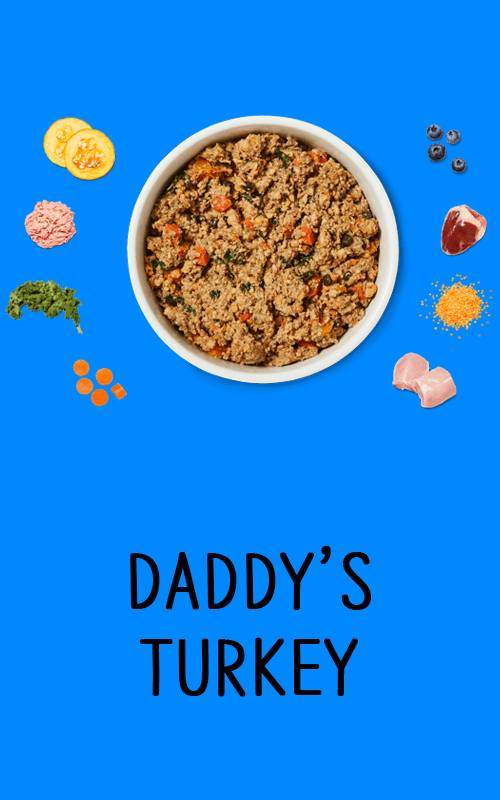
<style>
.page{position:relative;width:500px;height:800px;background:#0088ff}
.page>*{position:absolute;margin:0}
.t1{font:72px "NanumBarunpen";color:#000000;font-weight:bold}
</style>
<div class="page">
<p class="t1" style="left:130px;top:545px;width:241px;height:152px;text-align:center">DADDY’S<br>TURKEY</p>
</div>
